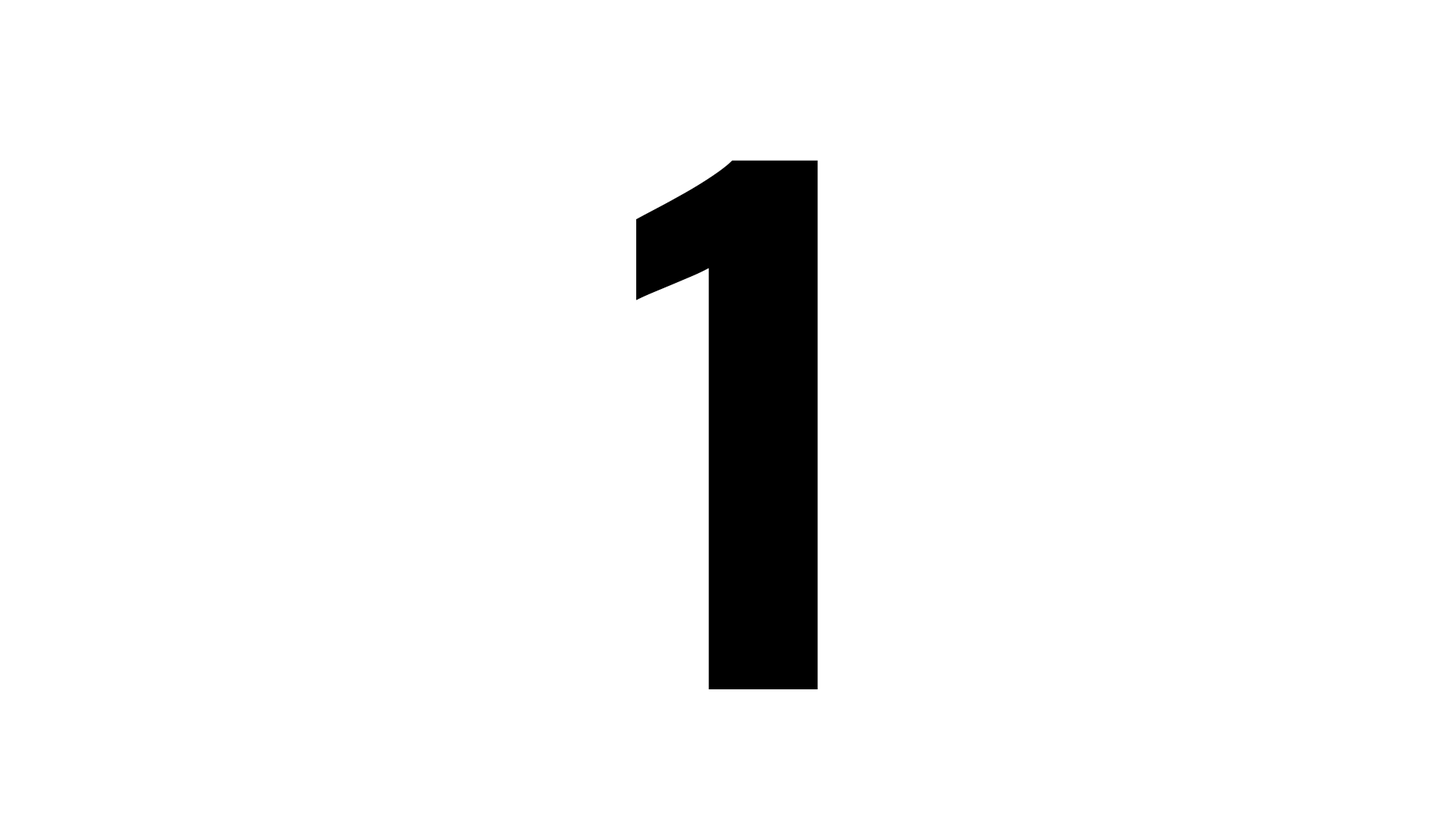
<style>
.page{position:relative;width:1456px;height:819px;background:#ffffff}
.page>*{position:absolute;margin:0}
.t1{font:652.6px "Oswald-Bold";color:#000000}
</style>
<div class="page">
<p class="t1" style="left:635px;top:160px;width:183px;height:529px">1</p>
</div>
